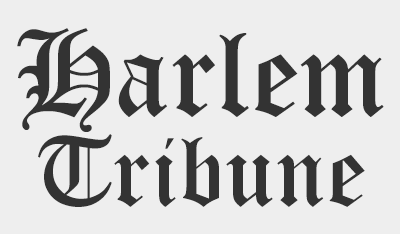
<style>
.page{position:relative;width:400px;height:234px;background:#eeeeee}
.page>*{position:absolute;margin:0}
.t1{font:100px/90px "OldEnglishTextMT";color:#333333}
.t2{font:120px/90px "OldEnglishTextMT";color:#333333}
</style>
<div class="page">
<p class="t1" style="left:17px;top:28px;width:367px;height:179px;text-align:center"><span class="t2">Harlem<br></span>Tribune</p>
</div>
